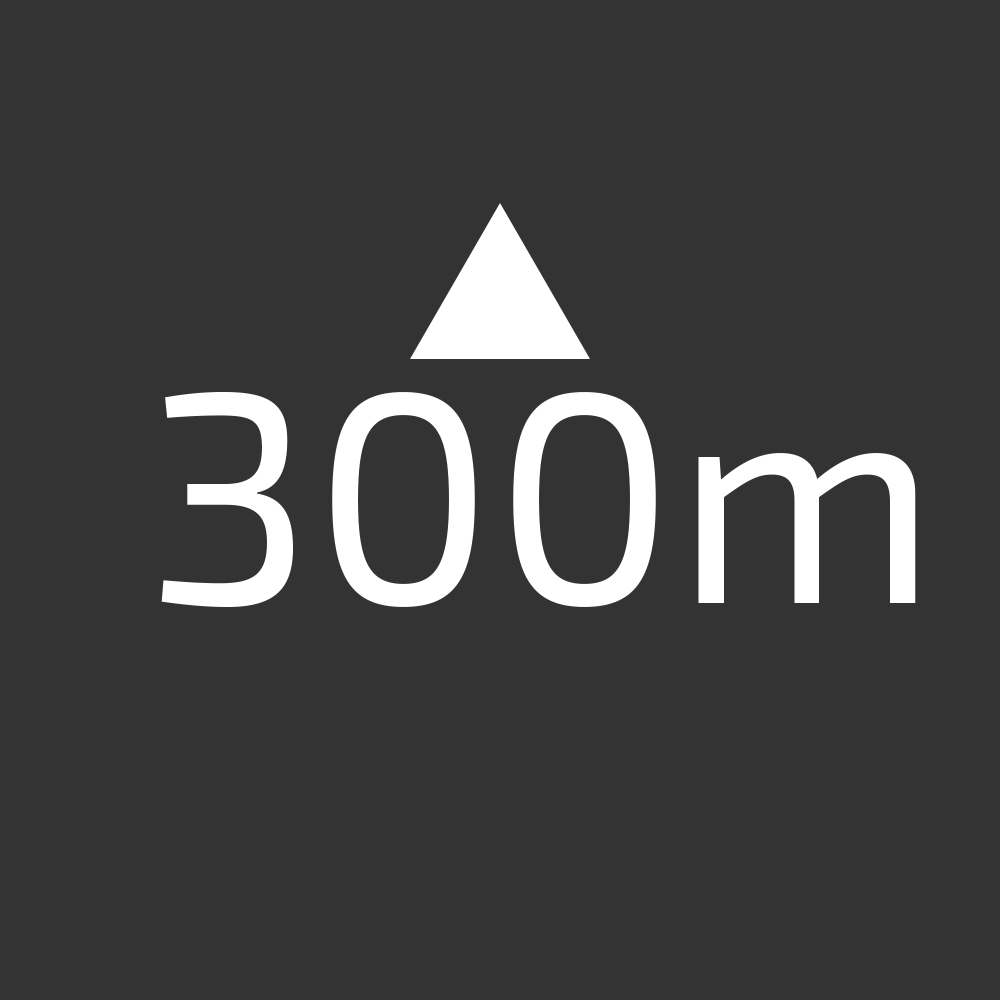
<style>
.page{position:relative;width:1000px;height:1000px;background:#333333}
.page>*{position:absolute;margin:0}
.t1{font:300px "Exo2-Regular";color:#ffffff}
</style>
<div class="page">
<p class="t1" style="left:161px;top:391px;width:755px;height:217px">300m</p>
</div>
